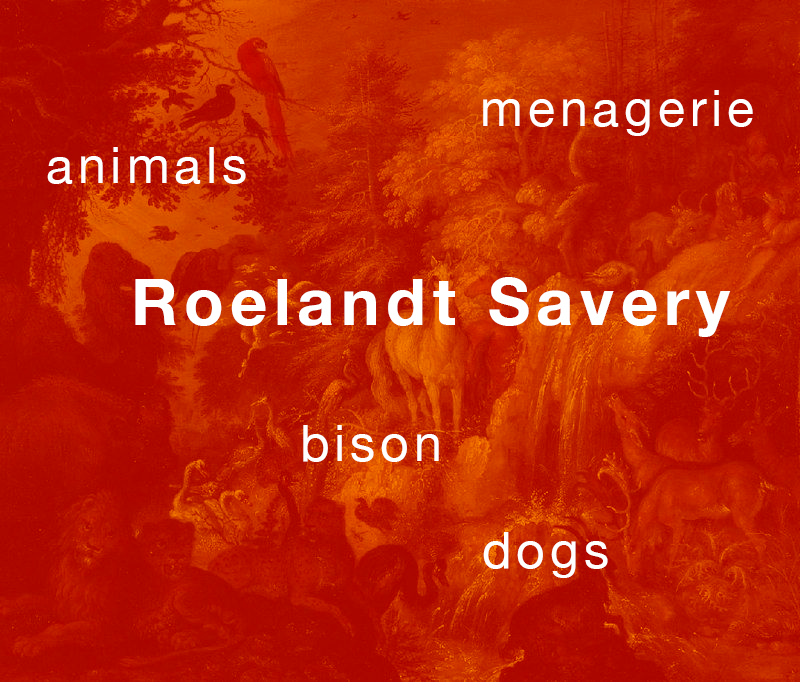
<style>
.page{position:relative;width:800px;height:682px}
.page>*{position:absolute;margin:0}
.t1{font:50px "HelveticaNeue";letter-spacing:0.1em;color:#ffffff}
.t2{font:65px "HelveticaNeue-Bold";letter-spacing:0.1em;color:#ffffff}
</style>
<div class="page">
<p class="t1" style="left:483px;top:90px;width:270px;height:46px">menagerie</p>
<p class="t1" style="left:47px;top:147px;width:199px;height:37px">animals</p>
<p class="t2" style="left:135px;top:277px;width:596px;height:60px">Roelandt Savery</p>
<p class="t1" style="left:303px;top:425px;width:136px;height:37px">bison</p>
<p class="t1" style="left:483px;top:532px;width:125px;height:46px">dogs</p>
</div>
